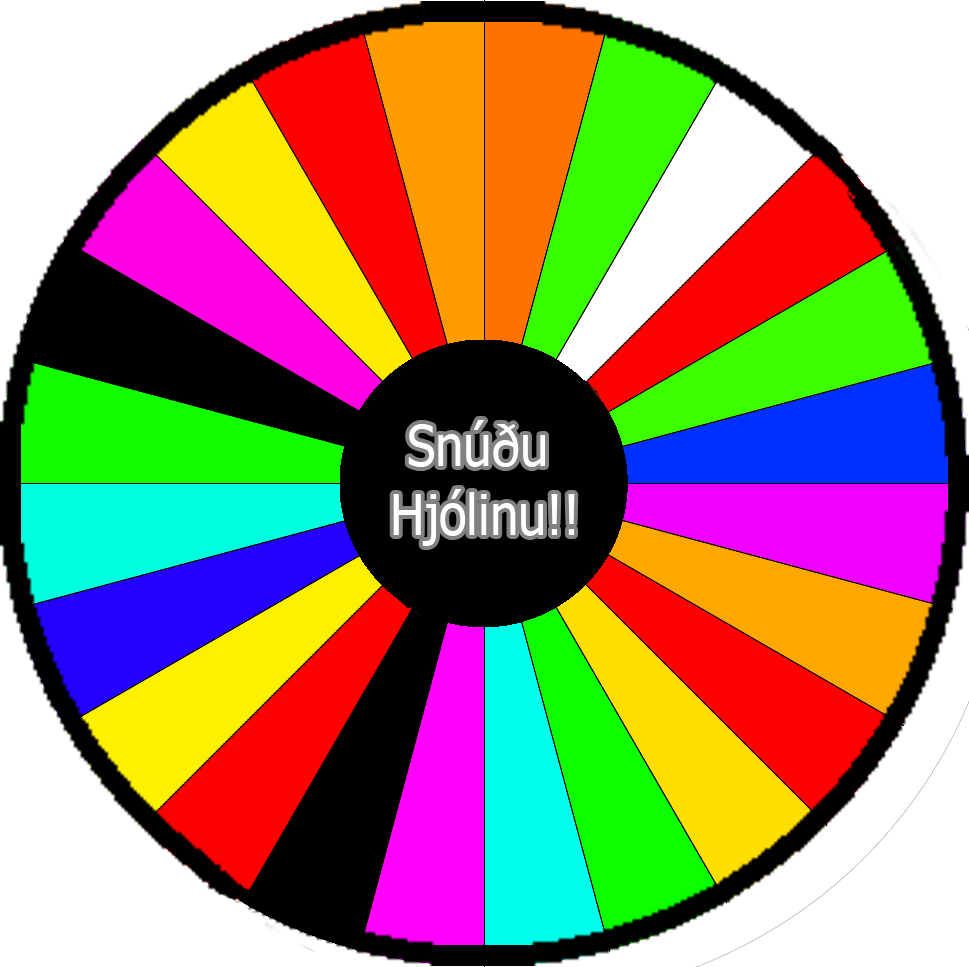
<style>
.page{position:relative;width:969px;height:967px;background:#ffffff}
.page>*{position:absolute;margin:0}
.t1{font:57.5px "Tahoma";color:#ffffff;scale:0.88 1}
</style>
<div class="page">
<p class="t1" style="left:393px;top:420px;width:182px;height:126px;text-align:center">Snúðu <br>Hjólinu!!</p>
</div>
